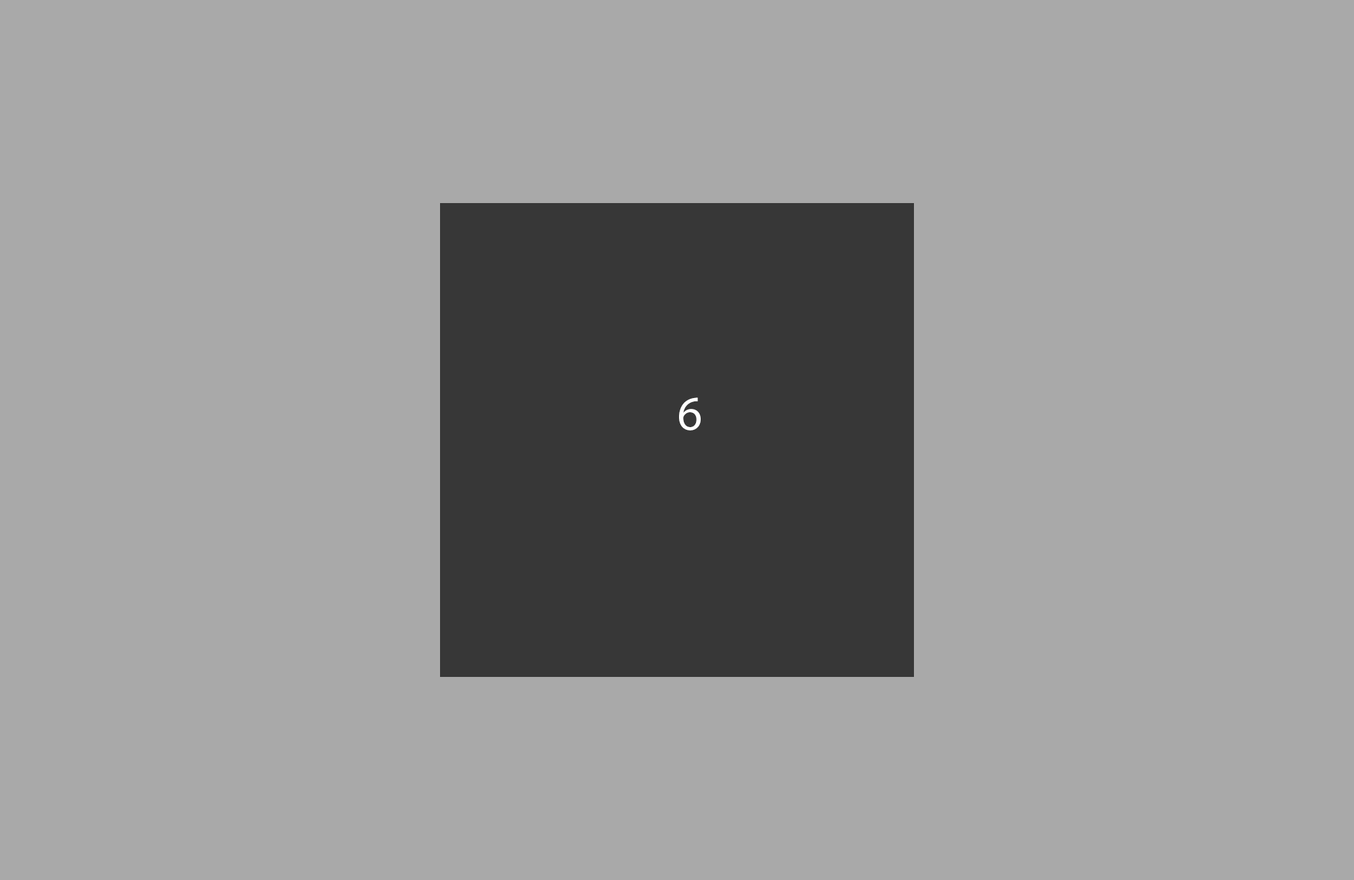
<style>
.page{position:relative;width:1354px;height:880px;background:#a9a9a9}
.page>*{position:absolute;margin:0}
.t1{font:48.8px "MyriadPro-Regular";color:#ffffff;text-transform:uppercase}
</style>
<div class="page">
<p class="t1" style="left:679px;top:398px;width:22px;height:33px">6</p>
</div>
